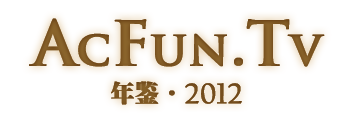
<style>
.page{position:relative;width:360px;height:120px;background:#ffffff}
.page>*{position:absolute;margin:0}
.t1{font:48px "TrajanPro-Bold";color:#8a642b;font-weight:bold}
.t2{font:60px "TrajanPro-Bold";color:#8a642b;font-weight:bold}
.t3{font:24px "SungtiEG-Ultra-?";color:#8a642b;font-weight:bold}
.t4{font:30px "CalifornianFB-Reg";color:#734c1c;font-weight:bold}
</style>
<div class="page">
<p class="t1" style="left:29px;top:18px;width:296px;height:49px"><span class="t2">A</span>c<span class="t2">F</span>un<span class="t2">.T</span>v</p>
<p class="t3" style="left:111px;top:81px;width:64px;height:24px">年鉴·</p>
<p class="t4" style="left:185px;top:83px;width:57px;height:21px">2012</p>
</div>
